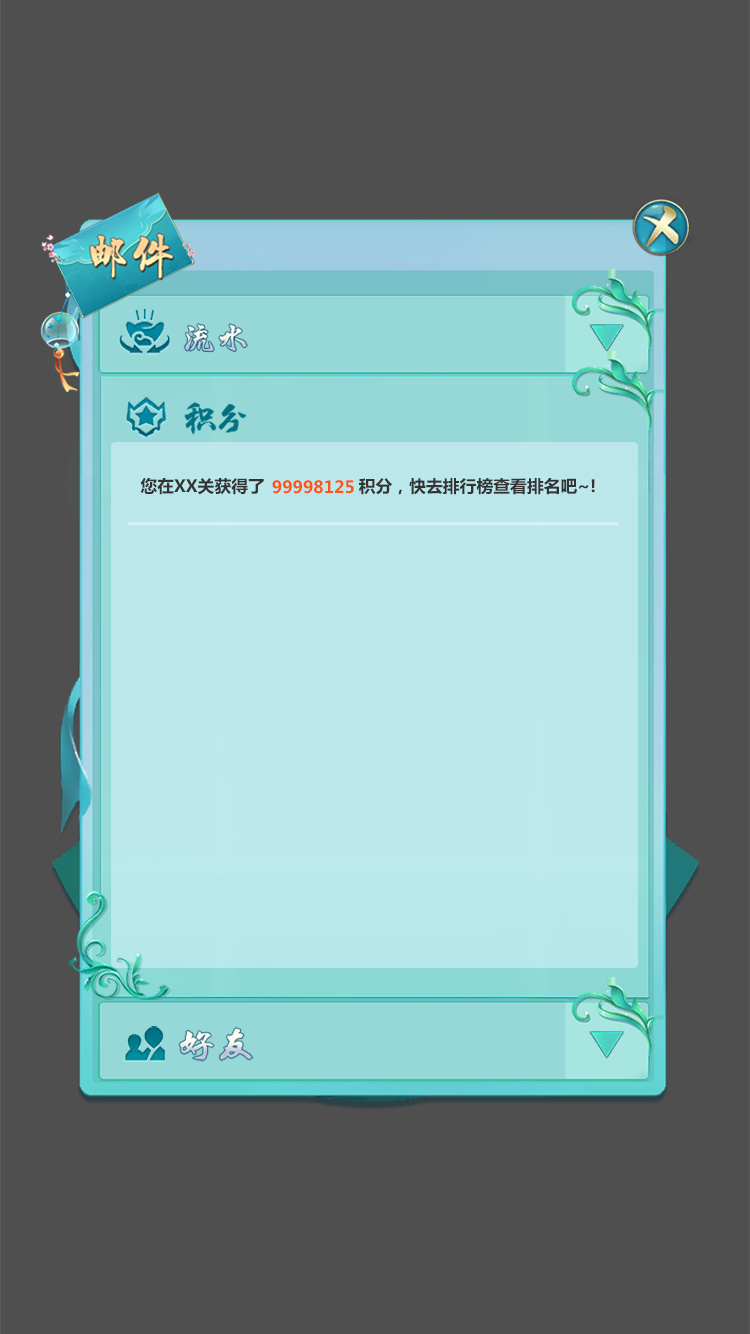
<style>
.page{position:relative;width:750px;height:1334px;background:#4f4f4f}
.page>*{position:absolute;margin:0}
.t1{font:16.8px "MicrosoftYaHei-Bold";color:#333333}
.t2{font:16.8px "MicrosoftYaHei-Bold";color:#fd5513}
</style>
<div class="page">
<p class="t1" style="left:140px;top:478px;width:124px;height:17px">您在XX关获得了</p>
<p class="t2" style="left:272px;top:480px;width:82px;height:14px">99998125</p>
<p class="t1" style="left:359px;top:478px;width:236px;height:17px">积分，快去排行榜查看排名吧~!</p>
</div>
